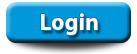
<style>
.page{position:relative;width:137px;height:54px;background:#0098db}
.page>*{position:absolute;margin:0}
.t1{font:23.9px "MyriadPro-Bold";color:#ffffff}
</style>
<div class="page">
<p class="t1" style="left:41px;top:13px;width:57px;height:22px">Login</p>
</div>
